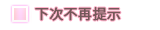
<style>
.page{position:relative;width:160px;height:30px;background:#ffffff}
.page>*{position:absolute;margin:0}
.t1{font:14px "SourceHanSansSC-Regular";color:#7c6a6a;font-weight:bold}
</style>
<div class="page">
<p class="t1" style="left:35px;top:7px;width:86px;height:14px">下次不再提示</p>
</div>
